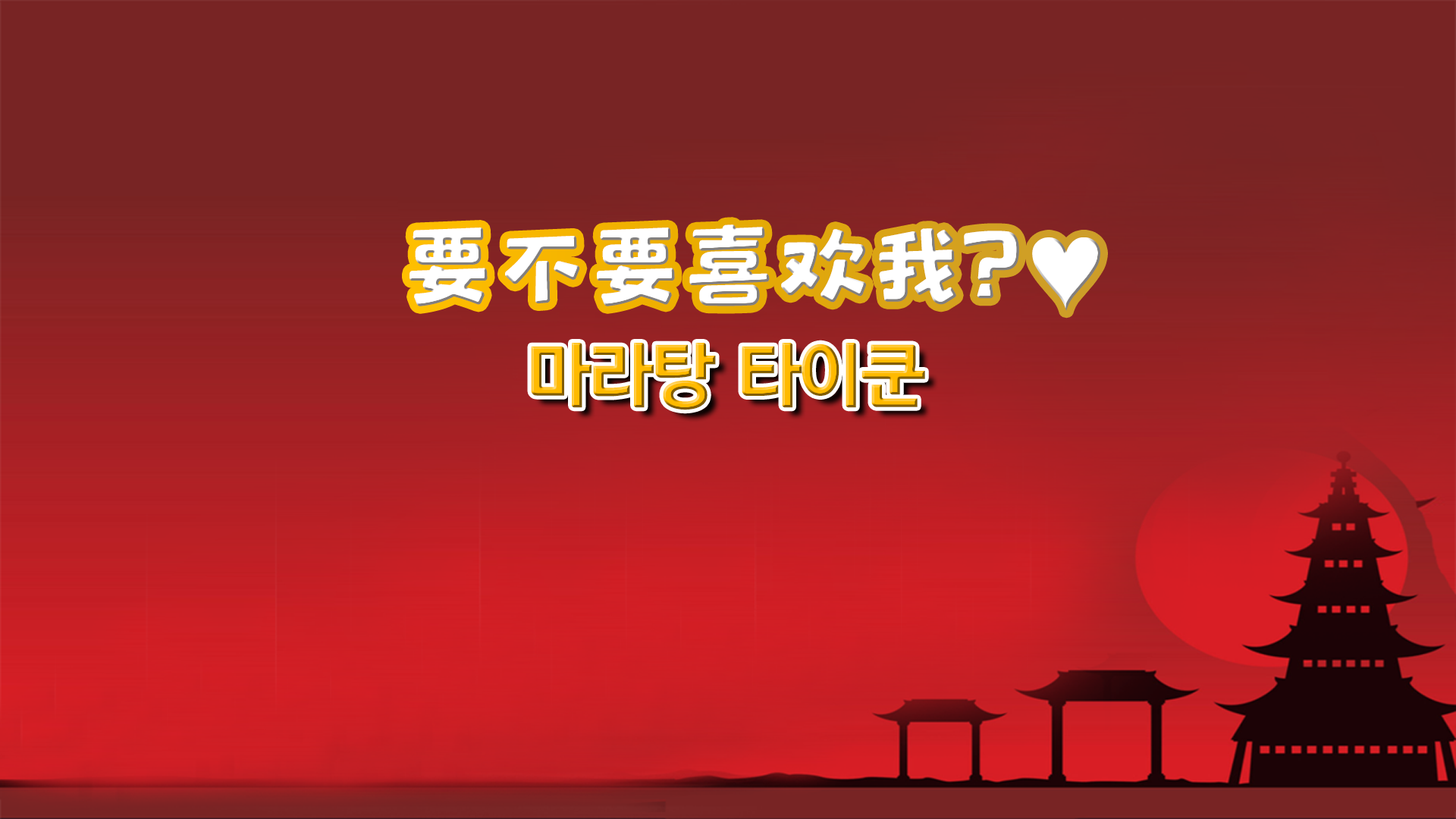
<style>
.page{position:relative;width:1456px;height:819px}
.page>*{position:absolute;margin:0}
.t1{font:98.8px "MF-LeZhen(Noncommercial)-Regular";letter-spacing:-0.05em;color:#ffffff}
.t2{font:98.8px "YDIYGO350";letter-spacing:-0.05em;color:#ffffff}
.t3{font:69.5px "KoreanDREAM6-R";letter-spacing:-0.05em}
</style>
<div class="page">
<p class="t1" style="left:409px;top:224px;width:691px;height:87px">要不要喜欢我?<span class="t2">♥</span></p>
<p class="t3" style="left:531px;top:343px;width:394px;height:67px">마라탕 타이쿤</p>
</div>
